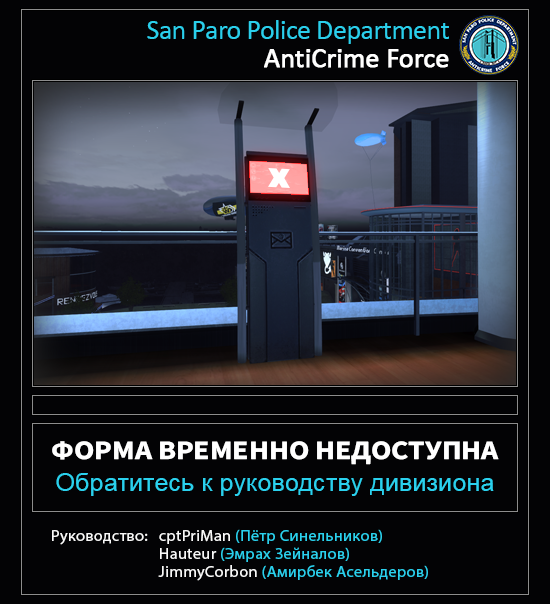
<style>
.page{position:relative;width:550px;height:604px;background:#030305}
.page>*{position:absolute;margin:0}
.t1{font:28px/28px "Calibri";letter-spacing:-0.02em;color:#2acfec}
.t2{font:28px/28px "Calibri";letter-spacing:-0.02em;color:#ffffff;font-weight:bold}
.t3{font:26.6px "SourceSansRoman-Bold";color:#ffffff;text-transform:uppercase;scale:1.12 1}
.t4{font:25px "ArialMT";letter-spacing:0.002em;color:#2ad1ee}
.t5{font:15.8px/18px "MyriadPro-Regular";letter-spacing:0.02em;color:#f9f9f9;scale:1.03 1}
.t6{font:15.8px/18px "MyriadPro-Regular";letter-spacing:0.02em;color:#2ad1ee;scale:1.03 1}
</style>
<div class="page">
<p class="t1" style="left:147px;top:20px;width:302px;height:48px;text-align:right">San Paro Police Department<br><span class="t2">AntiCrime Force</span></p>
<p class="t3" style="left:52px;top:441px;width:447px;height:24px">ФОРМА ВРЕМЕННО НЕДОСТУПНА</p>
<p class="t4" style="left:56px;top:473px;width:438px;height:23px">Обратитесь к руководству дивизиона</p>
<p class="t5" style="left:52px;top:529px;width:376px;height:52px">Руководство: cptPriMan <span class="t6">(Пётр Синельников)<br></span>                            Hauteur <span class="t6">(Эмрах Зейналов)<br>   </span>JimmyCorbon<span class="t6"> (Амирбек Асельдеров)</span></p>
</div>
